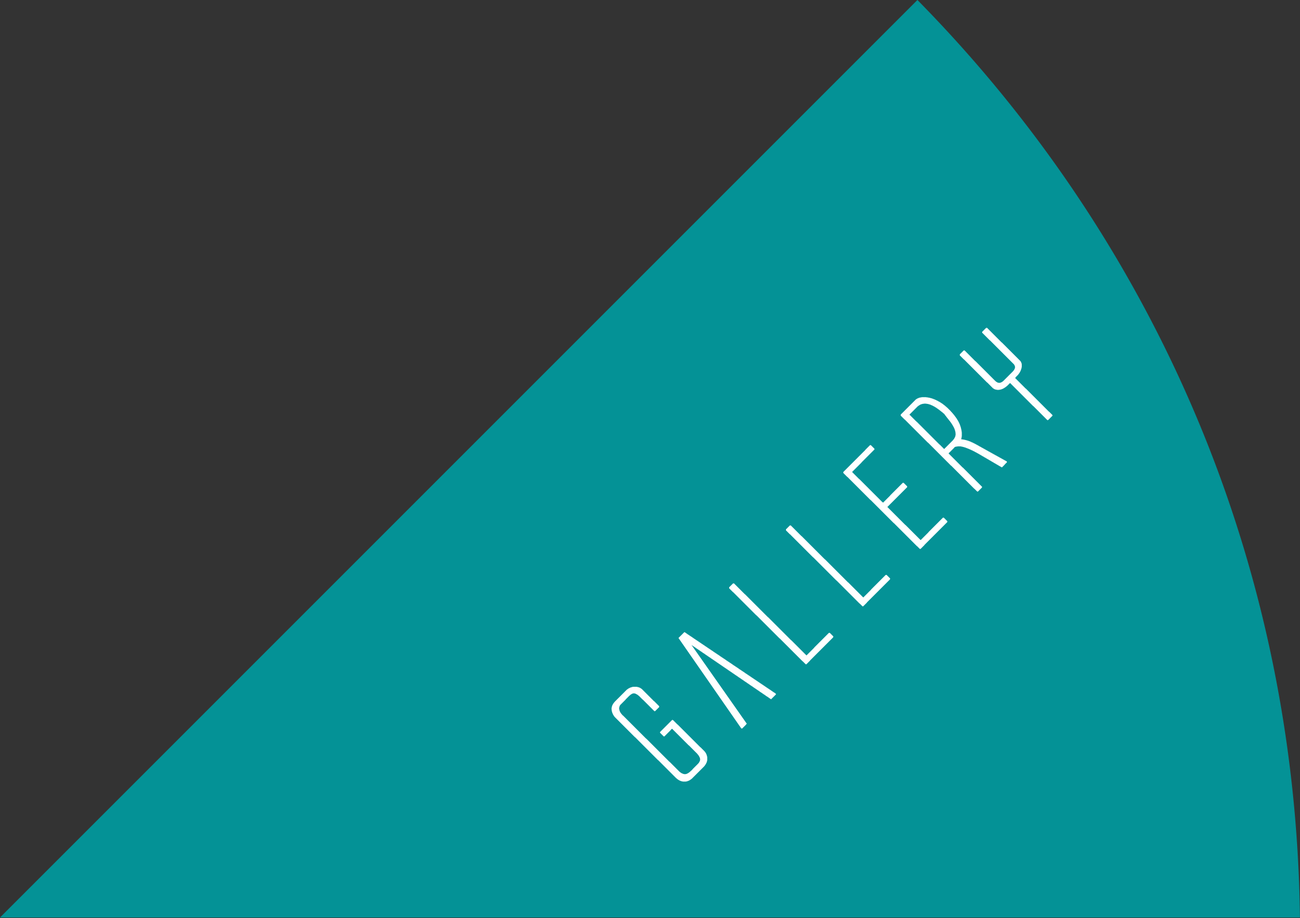
<style>
.page{position:relative;width:1300px;height:918px;background:#049296}
.page>*{position:absolute;margin:0}
.t1{font:143.4px "AlienLeagueExpanded";color:#ffffff;font-weight:bold}
</style>
<div class="page">
<p class="t1" style="left:611px;top:327px;width:441px;height:455px;rotate:-45deg">Gallery</p>
</div>
